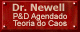
<style>
.page{position:relative;width:80px;height:32px}
.page>*{position:absolute;margin:0}
.t1{font:8px/7.3px "ArialMT";color:#f3dac5}
</style>
<div class="page">
<p class="t1" style="left:13px;top:13px;width:54px;height:13px;text-align:center">P&amp;D Agendado<br>Teoria do Caos</p>
</div>
